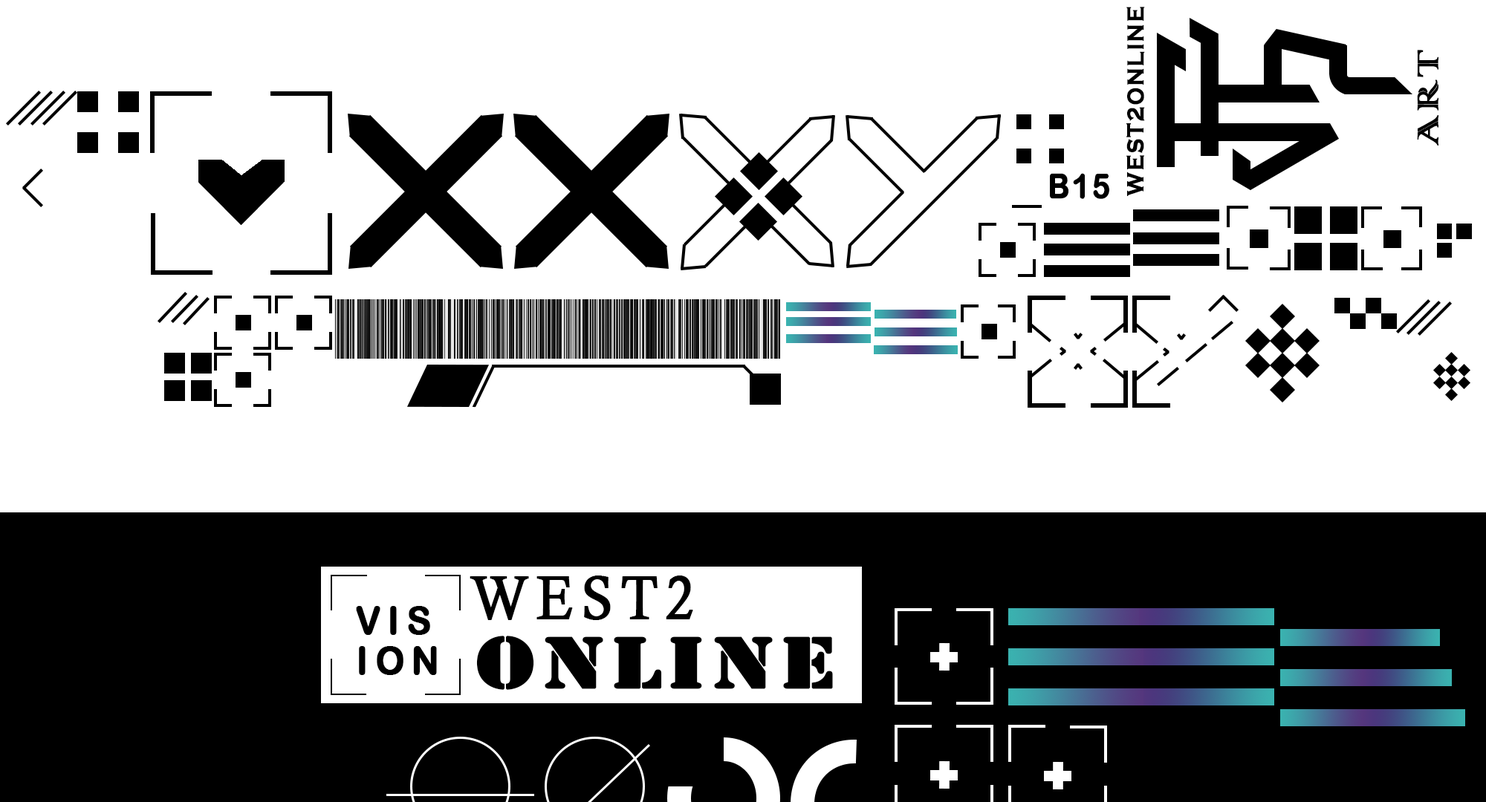
<style>
.page{position:relative;width:1486px;height:802px;background:#ffffff}
.page>*{position:absolute;margin:0}
.t1{font:24.1px "CopperplateGothic-Bold";letter-spacing:0.06em;color:#000000;font-weight:bold;scale:0.85 1}
.t2{font:39px "ColonnaMT";letter-spacing:0.06em;color:#000000;font-weight:bold;scale:1.14 1}
.t3{font:33.4px "ArialRoundedMTBold";letter-spacing:0.06em;color:#000000;font-weight:bold;scale:0.89 1}
.t4{font:61.9px "CalistoMT";letter-spacing:0.12em;color:#000000;font-weight:bold;scale:0.9 1}
.t5{font:39px "ArialRoundedMTBold";letter-spacing:0.18em;color:#000000;font-weight:bold;scale:0.93 1}
.t6{font:74.3px "Stencil";letter-spacing:0.06em;color:#000000;font-weight:bold;scale:1.23 1}
</style>
<div class="page">
<p class="t1" style="left:1126px;top:7px;width:19px;height:189px;rotate:-90deg">WEST2ONLINE</p>
<p class="t2" style="left:1417px;top:50px;width:21px;height:96px;rotate:-90deg">ART</p>
<p class="t3" style="left:1050px;top:173px;width:59px;height:26px">B15</p>
<p class="t4" style="left:470px;top:576px;width:223px;height:44px">WEST2</p>
<p class="t5" style="left:356px;top:606px;width:74px;height:29px">VIS</p>
<p class="t6" style="left:476px;top:636px;width:357px;height:54px">ONLINE</p>
<p class="t5" style="left:359px;top:646px;width:78px;height:29px">ION</p>
</div>
